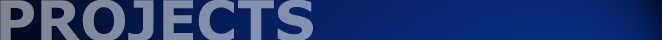
<style>
.page{position:relative;width:662px;height:40px}
.page>*{position:absolute;margin:0}
.t1{font:56px "Verdana-Bold";letter-spacing:-0.005em;color:#828ca4}
</style>
<div class="page">
<p class="t1" style="left:0px;top:0px;width:313px;height:42px">PROJECTS</p>
</div>
